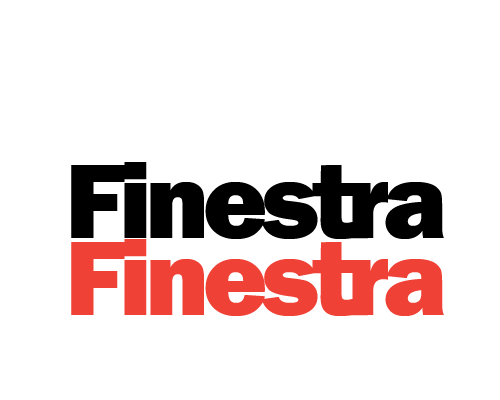
<style>
.page{position:relative;width:500px;height:400px;background:#ffffff}
.page>*{position:absolute;margin:0}
.t1{font:110px "FranklinGothic-Heavy";letter-spacing:-0.06em;color:#000000}
.t2{font:110px "FranklinGothic-Heavy";letter-spacing:-0.06em;color:#ef4135}
</style>
<div class="page">
<p class="t1" style="left:71px;top:162px;width:373px;height:77px">Finestra</p>
<p class="t2" style="left:71px;top:239px;width:373px;height:77px">Finestra</p>
</div>
